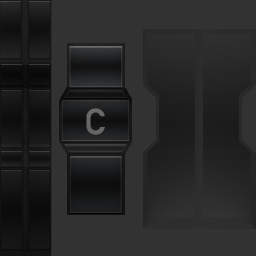
<style>
.page{position:relative;width:256px;height:256px;background:#323232}
.page>*{position:absolute;margin:0}
.t1{font:36px "DINMittelschriftLT";color:#686868}
</style>
<div class="page">
<p class="t1" style="left:86px;top:108px;width:19px;height:27px">C</p>
</div>
